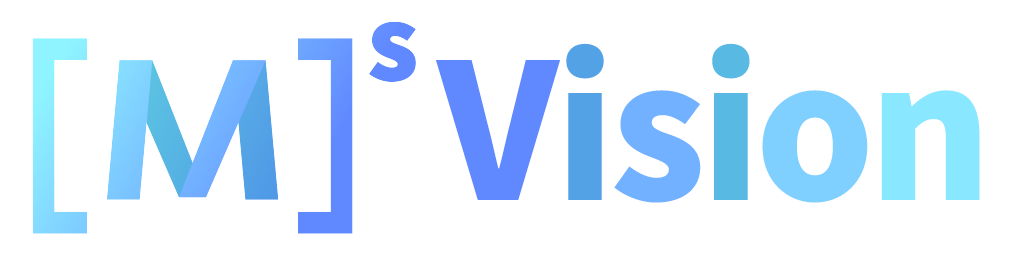
<style>
.page{position:relative;width:1017px;height:263px;background:#ffffff}
.page>*{position:absolute;margin:0}
.t1{font:187.5px "NotoSansSC-Black";color:#6189ff}
.t2{font:187.5px "NotoSansSC-Black";color:#53a2e6}
.t3{font:187.5px "NotoSansSC-Black";color:#72b1ff}
.t4{font:187.5px "NotoSansSC-Black";color:#58b9e3}
.t5{font:187.5px "NotoSansSC-Black";color:#7fd0ff}
.t6{font:187.5px "NotoSansSC-Black";color:#8ae7ff}
</style>
<div class="page">
<p class="t1" style="left:436px;top:43px;width:544px;height:160px">V<span class="t2">i</span><span class="t3">s</span><span class="t4">i</span><span class="t5">o</span><span class="t6">n</span></p>
</div>
